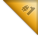
<style>
.page{position:relative;width:38px;height:38px;background:#ffffff}
.page>*{position:absolute;margin:0}
.t1{font:10px "HelveticaNeue-CondensedBlack"}
.t2{font:14px "HelveticaNeue-CondensedBlack"}
</style>
<div class="page">
<p class="t1" style="left:21px;top:5px;width:15px;height:11px;rotate:45deg">#<span class="t2">3</span></p>
<p class="t1" style="left:21px;top:5px;width:15px;height:12px;rotate:45deg">#<span class="t2">2</span></p>
<p class="t1" style="left:21px;top:5px;width:15px;height:11px;rotate:45deg">#<span class="t2">1</span></p>
</div>
